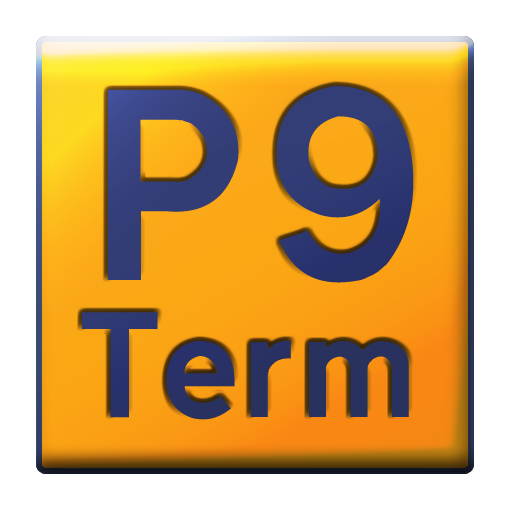
<style>
.page{position:relative;width:512px;height:512px;background:#ffffff}
.page>*{position:absolute;margin:0}
.t1{font:254px "Transport-Medium";color:#333d76}
.t2{font:140px "Transport-Medium";color:#333d76}
</style>
<div class="page">
<p class="t1" style="left:107px;top:85px;width:307px;height:198px">P9</p>
<p class="t2" style="left:82px;top:312px;width:327px;height:108px">Term</p>
</div>
